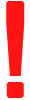
<style>
.page{position:relative;width:30px;height:100px;background:#ffffff}
.page>*{position:absolute;margin:0}
.t1{font:130px "ArialMT";color:#ff1414;text-transform:uppercase;font-weight:bold}
</style>
<div class="page">
<p class="t1" style="left:6px;top:1px;width:19px;height:97px">!</p>
</div>
